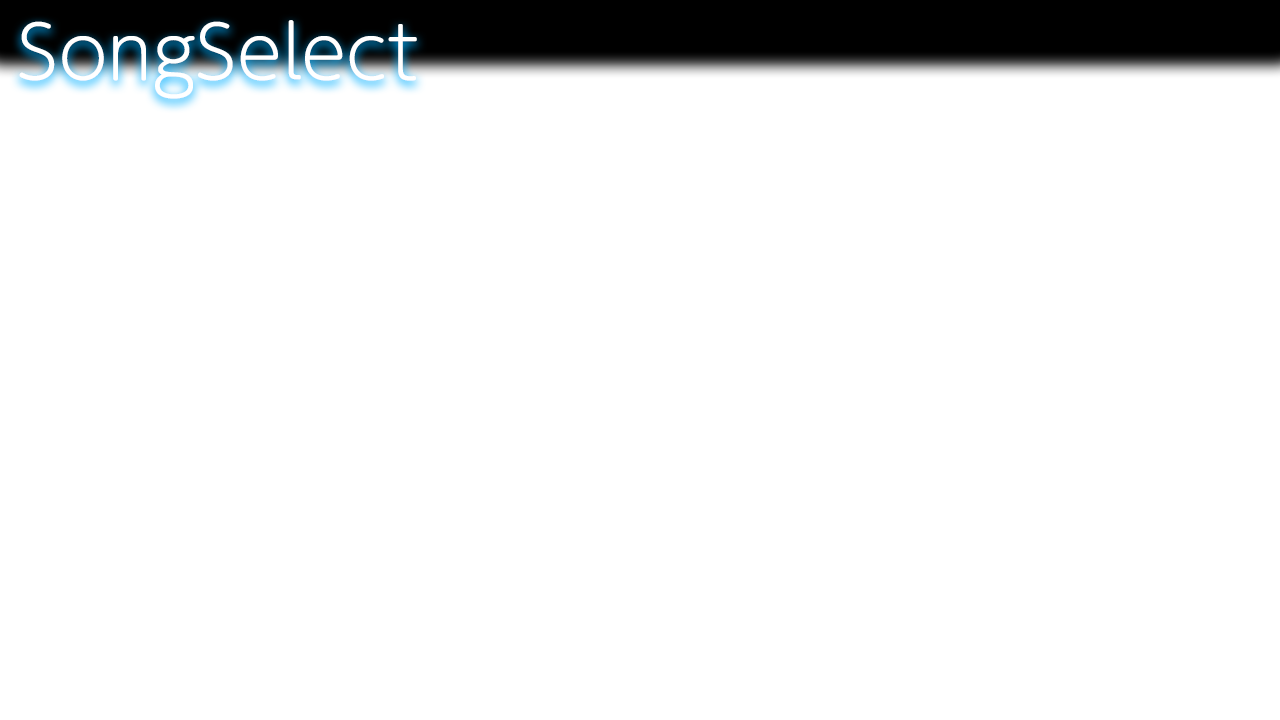
<style>
.page{position:relative;width:1280px;height:720px;background:#ffffff}
.page>*{position:absolute;margin:0}
.t1{font:72px "UDShinMGoPr6N-Light";color:#ffffff}
</style>
<div class="page">
<p class="t1" style="left:19px;top:20px;width:398px;height:79px">SongSelect</p>
</div>
